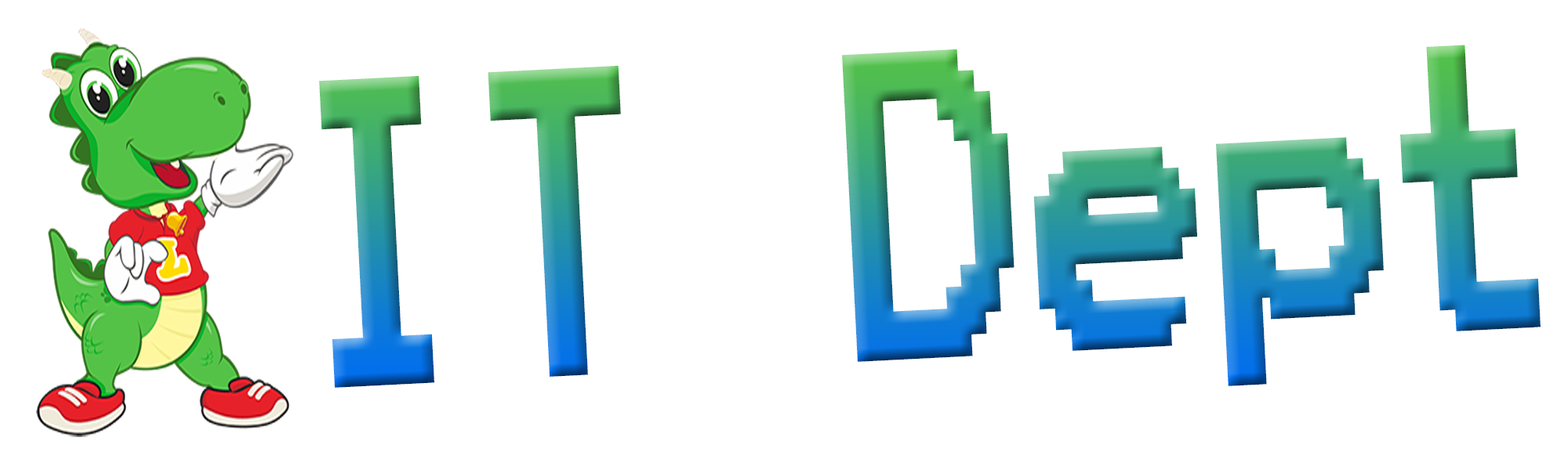
<style>
.page{position:relative;width:1568px;height:470px;background:#ffffff}
.page>*{position:absolute;margin:0}
.t1{font:345.1px "Terminal";font-weight:bold;scale:0.71 1}
</style>
<div class="page">
<p class="t1" style="left:319px;top:45px;width:1222px;height:343px;rotate:-3deg">IT Dept</p>
</div>
